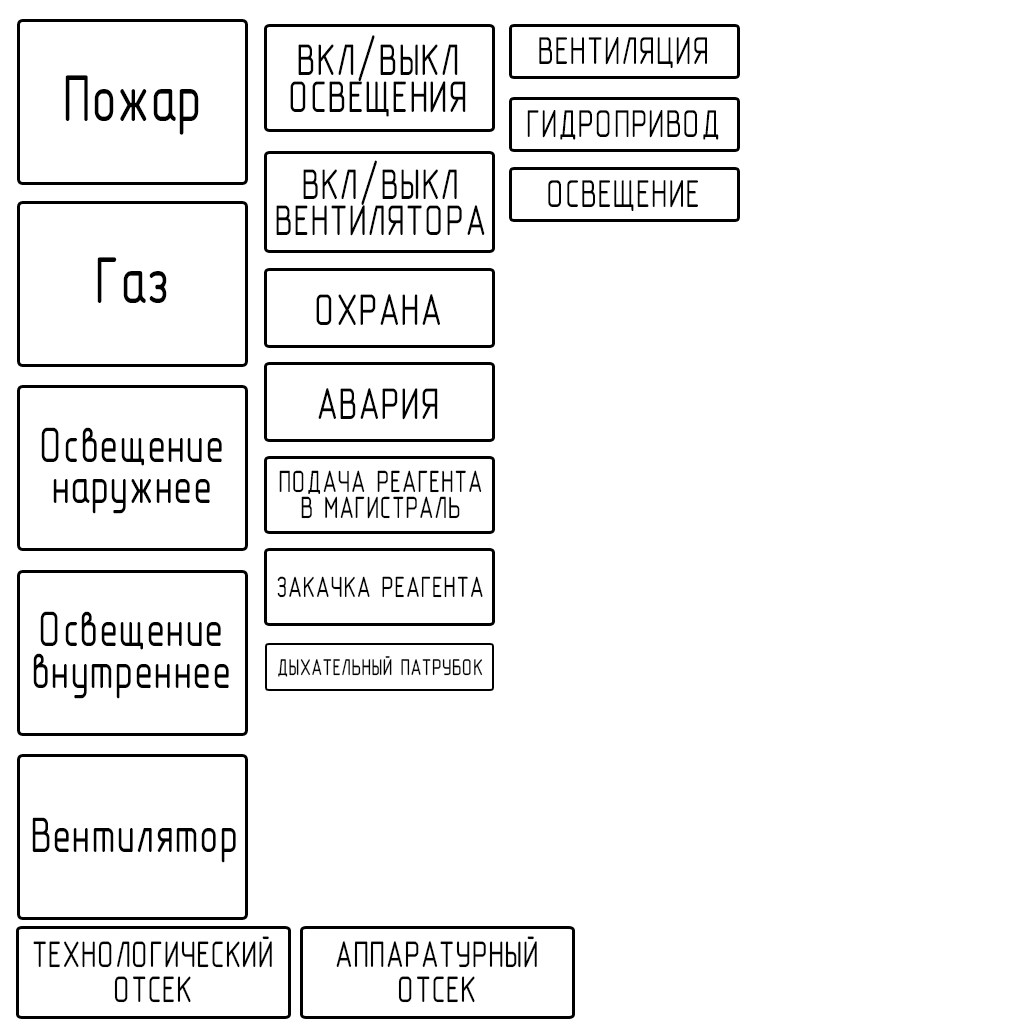
<style>
.page{position:relative;width:1024px;height:1024px;background:#ffffff}
.page>*{position:absolute;margin:0}
.t1{font:44.9px/36.9px "GOST-2.304-81typeB";color:#000000;scale:0.81 1}
.t2{font:39.2px "GOST-2.304-81typeB";color:#000000;scale:0.8 1}
.t3{font:66.9px "GOST-2.304-81typeB";color:#000000;scale:0.81 1}
.t4{font:43.3px/35.6px "GOST-2.304-81typeB";color:#000000;scale:0.81 1}
.t5{font:44.9px "GOST-2.304-81typeB";color:#000000;scale:0.81 1}
.t6{font:50.4px/41.4px "GOST-2.304-81typeB";color:#000000;scale:0.81 1}
.t7{font:31px/25.5px "GOST-2.304-81typeB";color:#000000;scale:0.8 1}
.t8{font:29.6px "GOST-2.304-81typeB";color:#000000;scale:0.81 1}
.t9{font:22.9px "GOST-2.304-81typeB";color:#000000;scale:0.8 1}
.t10{font:50.4px "GOST-2.304-81typeB";color:#000000;scale:0.81 1}
.t11{font:37.3px/34.5px "GOST-2.304-81typeB";color:#000000;scale:0.8 1}
</style>
<div class="page">
<p class="t1" style="left:290px;top:35px;width:176px;height:82px;text-align:center">ВКЛ/ВЫКЛ<br>ОСВЕЩЕНИЯ</p>
<p class="t2" style="left:539px;top:37px;width:168px;height:31px">ВЕНТИЛЯЦИЯ</p>
<p class="t3" style="left:65px;top:75px;width:134px;height:60px">Пожар</p>
<p class="t2" style="left:527px;top:110px;width:192px;height:30px">ГИДРОПРИВОД</p>
<p class="t4" style="left:276px;top:160px;width:209px;height:76px;text-align:center">ВКЛ/ВЫКЛ<br>ВЕНТИЛЯТОРА</p>
<p class="t2" style="left:548px;top:180px;width:150px;height:31px">ОСВЕЩЕНИЕ</p>
<p class="t3" style="left:97px;top:257px;width:70px;height:46px">Газ</p>
<p class="t5" style="left:316px;top:294px;width:124px;height:31px">ОХРАНА</p>
<p class="t5" style="left:318px;top:388px;width:120px;height:32px">АВАРИЯ</p>
<p class="t6" style="left:41px;top:427px;width:181px;height:87px;text-align:center">Освещение<br>наружнее</p>
<p class="t7" style="left:279px;top:470px;width:203px;height:49px;text-align:center">ПОДАЧА РЕАГЕНТА<br>В МАГИСТРАЛЬ</p>
<p class="t8" style="left:277px;top:576px;width:206px;height:22px">ЗАКАЧКА РЕАГЕНТА</p>
<p class="t6" style="left:33px;top:611px;width:196px;height:88px;text-align:center">Освещение<br>внутреннее</p>
<p class="t9" style="left:278px;top:656px;width:205px;height:21px">ДЫХАТЕЛЬНЫЙ ПАТРУБОК</p>
<p class="t10" style="left:32px;top:817px;width:204px;height:46px">Вентилятор</p>
<p class="t11" style="left:33px;top:936px;width:239px;height:67px;text-align:center">ТЕХНОЛОГИЧЕСКИЙ<br>ОТСЕК</p>
<p class="t11" style="left:336px;top:936px;width:201px;height:67px;text-align:center">АППАРАТУРНЫЙ<br>ОТСЕК</p>
</div>
